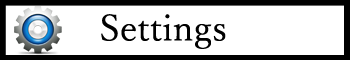
<style>
.page{position:relative;width:350px;height:60px;background:#ffffff}
.page>*{position:absolute;margin:0}
.t1{font:36px "YuMincho-Regular";color:#000000}
</style>
<div class="page">
<p class="t1" style="left:101px;top:14px;width:125px;height:35px">Settings</p>
</div>
